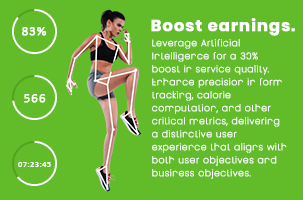
<style>
.page{position:relative;width:303px;height:200px;background:#62bc29}
.page>*{position:absolute;margin:0}
.t1{font:13px "Calibri";letter-spacing:0.05em;color:#ffffff;font-weight:bold}
.t2{font:16px "Poppins-Bold";letter-spacing:0.05em;color:#ffffff;font-weight:bold}
.t3{font:9px/13px "Poppins-Thin";letter-spacing:0.05em;color:#ffffff;font-weight:bold}
.t4{font:8px "Calibri";letter-spacing:0.05em;color:#ffffff;font-weight:bold}
</style>
<div class="page">
<p class="t1" style="left:21px;top:27px;width:26px;height:9px">83%</p>
<p class="t2" style="left:151px;top:18px;width:144px;height:18px">Boost earnings.</p>
<p class="t3" style="left:152px;top:39px;width:135px;height:140px">Leverage Artificial <br>Intelligence for a 30% <br>boost in service quality. <br>Enhance precision in form <br>tracking, calorie <br>computation, and other <br>critical metrics, delivering <br>a distinctive user <br>experience that aligns with <br>both user objectives and <br>business objectives.</p>
<p class="t1" style="left:24px;top:94px;width:22px;height:9px">566</p>
<p class="t4" style="left:18px;top:162px;width:33px;height:5px">07:23:45</p>
</div>
